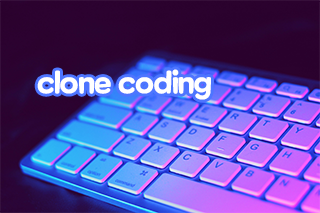
<style>
.page{position:relative;width:320px;height:213px}
.page>*{position:absolute;margin:0}
.t1{font:30px "MaplestoryBold";letter-spacing:-0.025em;color:#ffffff}
</style>
<div class="page">
<p class="t1" style="left:37px;top:69px;width:174px;height:31px">clone coding</p>
</div>
